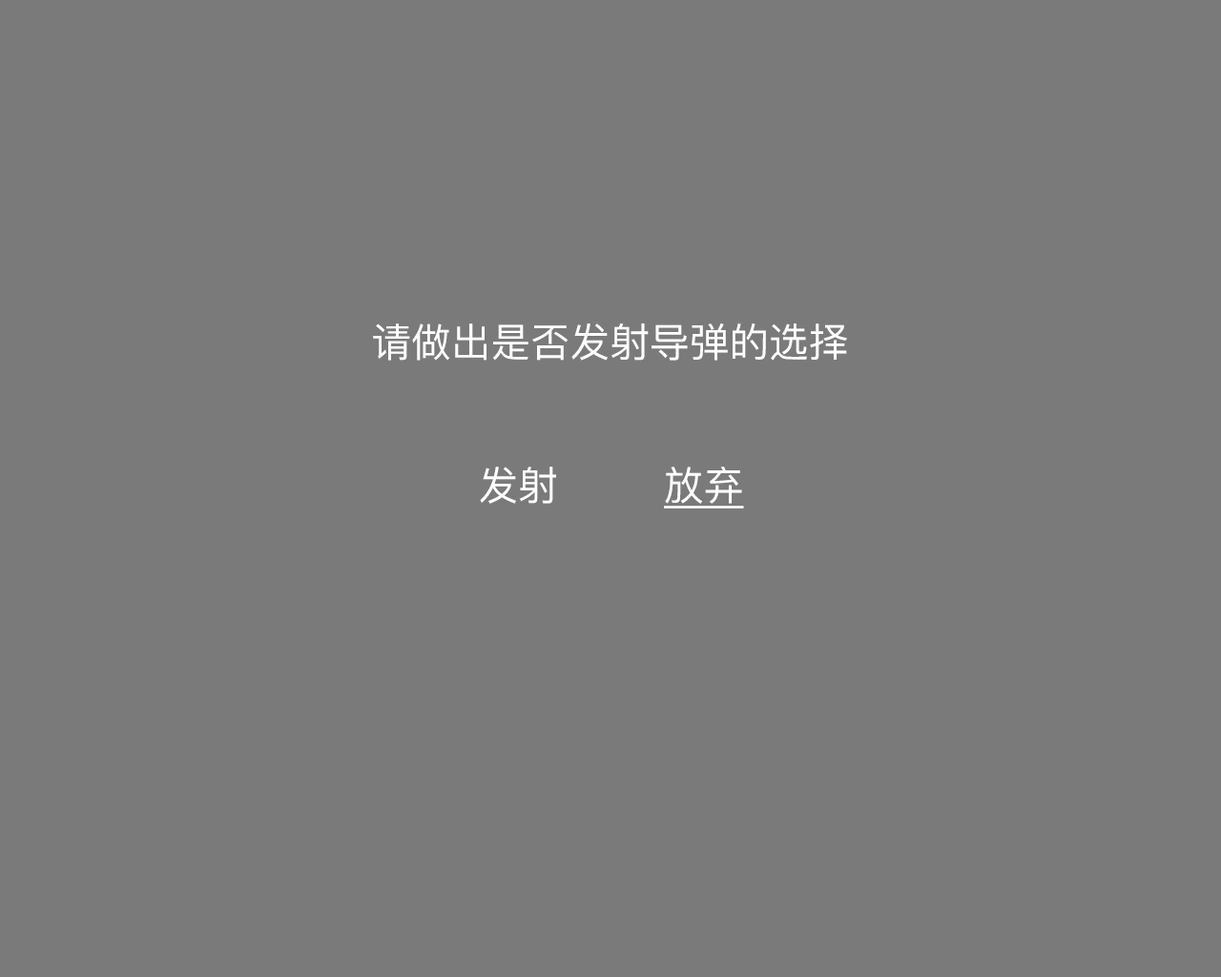
<style>
.page{position:relative;width:1221px;height:977px;background:#7a7a7a}
.page>*{position:absolute;margin:0}
.t1{font:39.7px "PingFangSC-Regular";color:#ffffff}
.t2{font:39.7px "PingFangSC-Regular";color:#ffffff;text-decoration:underline}
</style>
<div class="page">
<p class="t1" style="left:373px;top:323px;width:474px;height:38px">请做出是否发射导弹的选择</p>
<p class="t1" style="left:480px;top:466px;width:264px;height:42px">发射        <span class="t2">放弃</span></p>
</div>
